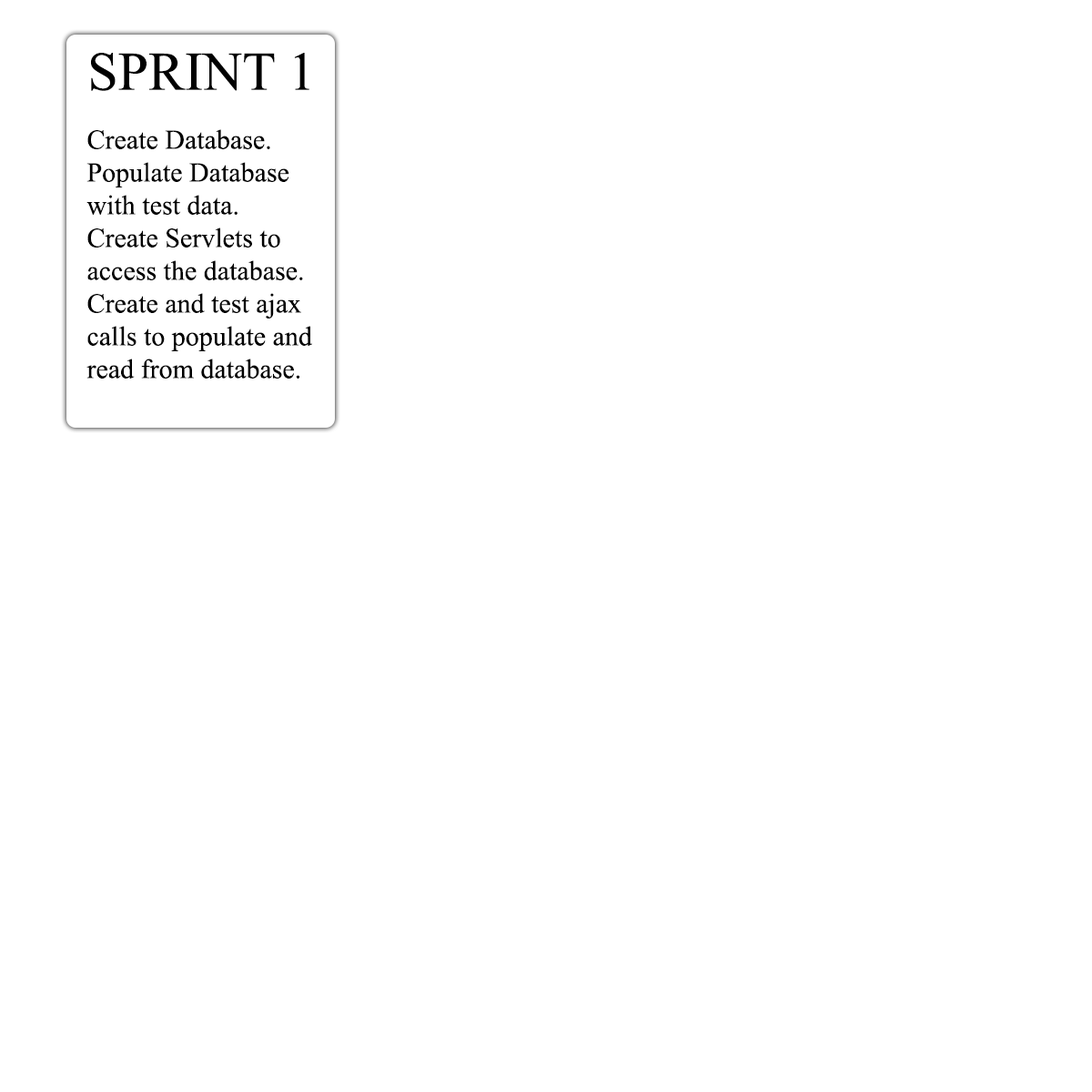
<style>
.page{position:relative;width:1092px;height:1092px;background:#ffffff}
.page>*{position:absolute;margin:0}
.t1{font:54.6px "TimesNewRomanPSMT";color:#000000}
.t2{font:27.3px "TimesNewRomanPSMT";color:#000000}
</style>
<div class="page">
<p class="t1" style="left:91px;top:53px;width:218px;height:38px">SPRINT 1</p>
<p class="t2" style="left:86px;top:129px;width:226px;height:250px">Create Database.<br>Populate Database<br>with test data.<br>Create Servlets to<br>access the database.<br>Create and test ajax<br>calls to populate and <br>read from database.</p>
</div>
